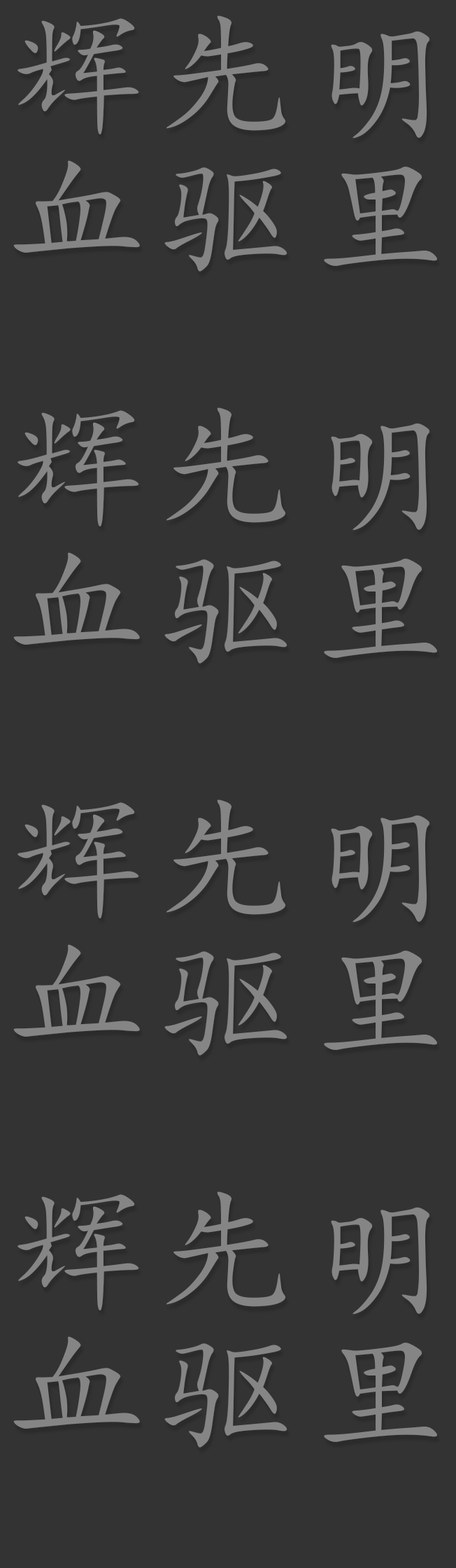
<style>
.page{position:relative;width:456px;height:1568px;background:#333333}
.page>*{position:absolute;margin:0}
.t1{font:137.7px "KaiTi";color:#858585}
.t2{font:135.8px "KaiTi";color:#858585}
.t3{font:133px "KaiTi";color:#858585}
</style>
<div class="page">
<p class="t1" style="left:164px;top:15px;width:124px;height:257px">先驱</p>
<p class="t2" style="left:13px;top:18px;width:127px;height:235px">辉血</p>
<p class="t3" style="left:324px;top:31px;width:114px;height:235px">明里</p>
<p class="t2" style="left:13px;top:410px;width:127px;height:235px">辉血</p>
<p class="t1" style="left:164px;top:407px;width:124px;height:257px">先驱</p>
<p class="t3" style="left:324px;top:423px;width:114px;height:235px">明里</p>
<p class="t2" style="left:13px;top:802px;width:127px;height:235px">辉血</p>
<p class="t1" style="left:164px;top:799px;width:124px;height:257px">先驱</p>
<p class="t3" style="left:324px;top:815px;width:114px;height:235px">明里</p>
<p class="t1" style="left:164px;top:1191px;width:124px;height:257px">先驱</p>
<p class="t2" style="left:13px;top:1194px;width:127px;height:235px">辉血</p>
<p class="t3" style="left:324px;top:1207px;width:114px;height:235px">明里</p>
</div>
